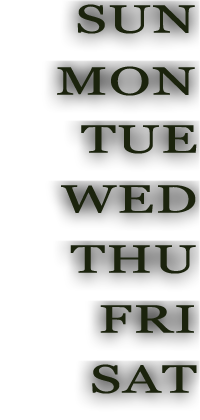
<style>
.page{position:relative;width:200px;height:420px;background:#ffffff}
.page>*{position:absolute;margin:0}
.t1{font:39.2px "Georgia";color:#1b230d;font-weight:bold;scale:1.43 1}
</style>
<div class="page">
<p class="t1" style="left:77px;top:4px;width:118px;height:30px">SUN</p>
<p class="t1" style="left:57px;top:66px;width:138px;height:30px">MON</p>
<p class="t1" style="left:81px;top:125px;width:116px;height:29px">TUE</p>
<p class="t1" style="left:61px;top:185px;width:135px;height:28px">WED</p>
<p class="t1" style="left:70px;top:245px;width:126px;height:29px">THU</p>
<p class="t1" style="left:100px;top:305px;width:94px;height:28px">FRI</p>
<p class="t1" style="left:92px;top:364px;width:105px;height:30px">SAT</p>
</div>
